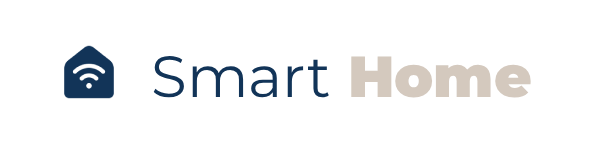
<style>
.page{position:relative;width:600px;height:150px;background:#ffffff}
.page>*{position:absolute;margin:0}
.t1{font:58px "Montserrat-Regular";color:#123458}
.t2{font:58px "Montserrat-Black";color:#d4c9be}
</style>
<div class="page">
<p class="t1" style="left:153px;top:56px;width:378px;height:42px">Smart <span class="t2">Home</span></p>
</div>
